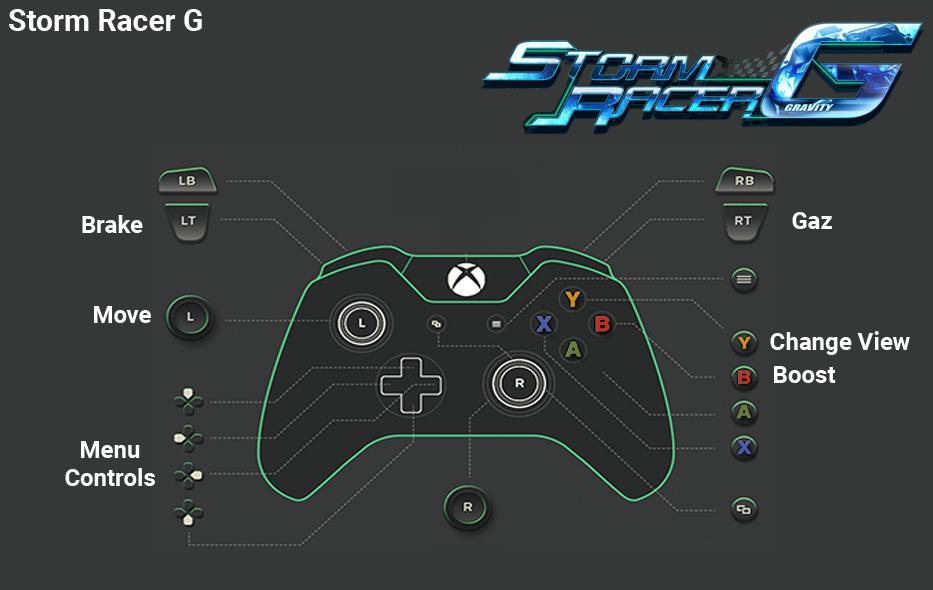
<style>
.page{position:relative;width:933px;height:590px;background:#363838}
.page>*{position:absolute;margin:0}
.t1{font:30px "Roboto-Bold";color:#ffffff}
.t2{font:24px "Roboto-Bold";color:#ffffff}
.t3{font:24px/28px "Roboto-Bold";color:#ffffff}
</style>
<div class="page">
<p class="t1" style="left:9px;top:9px;width:193px;height:22px">Storm Racer G</p>
<p class="t2" style="left:82px;top:215px;width:61px;height:18px">Brake</p>
<p class="t2" style="left:792px;top:212px;width:40px;height:17px">Gaz</p>
<p class="t2" style="left:94px;top:306px;width:57px;height:17px">Move</p>
<p class="t2" style="left:770px;top:331px;width:140px;height:24px">Change View</p>
<p class="t2" style="left:774px;top:366px;width:62px;height:17px">Boost</p>
<p class="t3" style="left:65px;top:441px;width:90px;height:45px;text-align:center">Menu<br>Controls</p>
</div>
